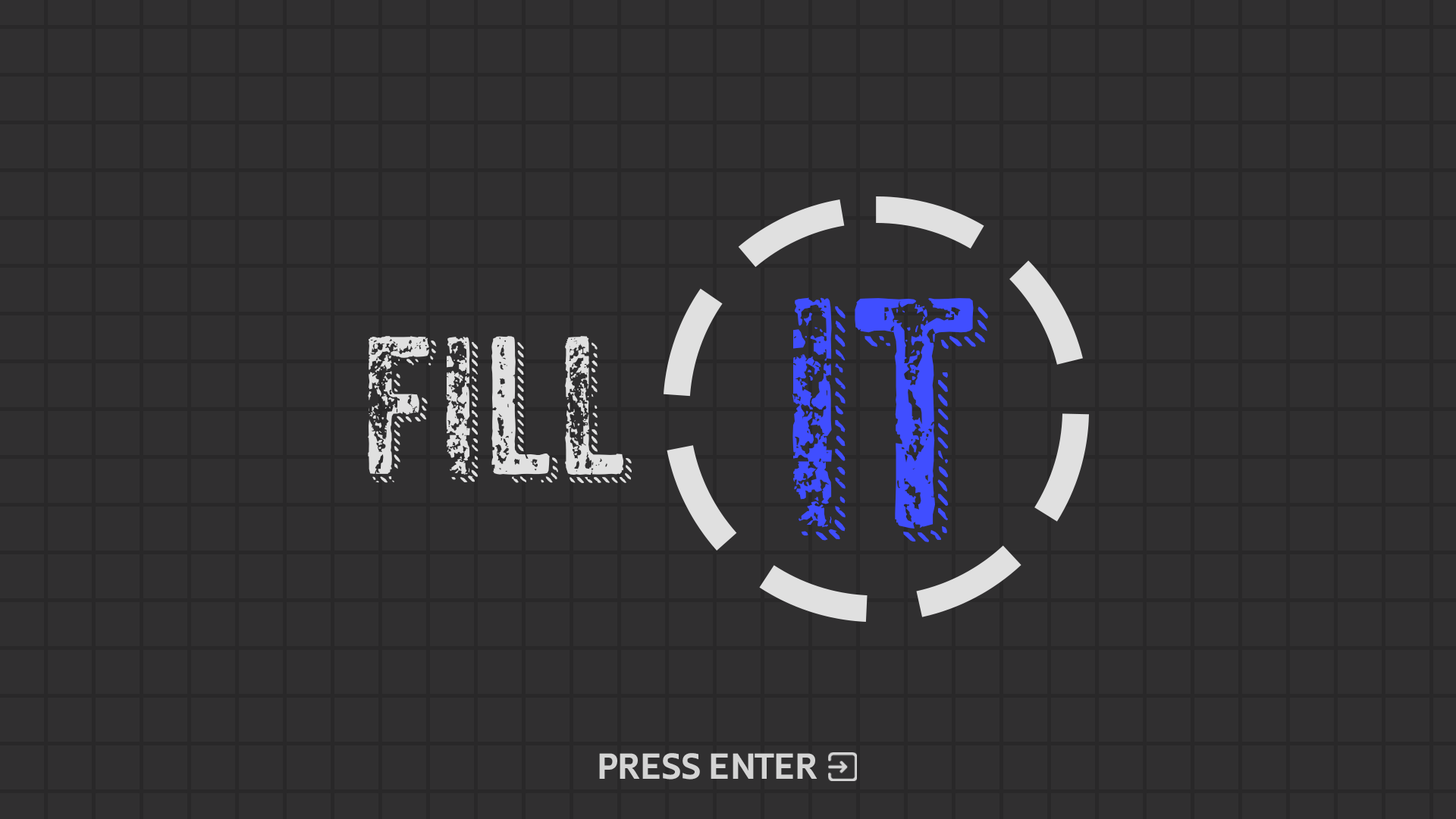
<style>
.page{position:relative;width:1456px;height:819px;background:#302f30}
.page>*{position:absolute;margin:0}
.t1{font:316px "AnodyneCombined";color:#404eff}
.t2{font:189.6px "AnodyneCombined";color:#e0e0e0}
.t3{font:31.6px "JuneExptVariable-Active";color:#d4d4d4}
</style>
<div class="page">
<p class="t1" style="left:792px;top:297px;width:196px;height:245px">IT</p>
<p class="t2" style="left:368px;top:336px;width:264px;height:147px">FILL</p>
<p class="t3" style="left:599px;top:753px;width:218px;height:27px">PRESS ENTER</p>
</div>
